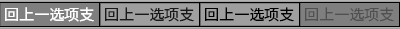
<style>
.page{position:relative;width:400px;height:29px;background:#7f7f7f}
.page>*{position:absolute;margin:0}
.t1{font:15px "SourceHanSansSC-Normal";color:#ffffff}
.t2{font:15px "SourceHanSansSC-Normal";color:#191919}
.t3{font:15px "SourceHanSansSC-Normal";color:#000000}
.t4{font:15px "SourceHanSansSC-Normal";color:#505050}
</style>
<div class="page">
<p class="t1" style="left:5px;top:7px;width:89px;height:15px">回上一选项支</p>
<p class="t2" style="left:105px;top:7px;width:89px;height:15px">回上一选项支</p>
<p class="t3" style="left:205px;top:7px;width:89px;height:15px">回上一选项支</p>
<p class="t4" style="left:305px;top:7px;width:89px;height:15px">回上一选项支</p>
</div>
